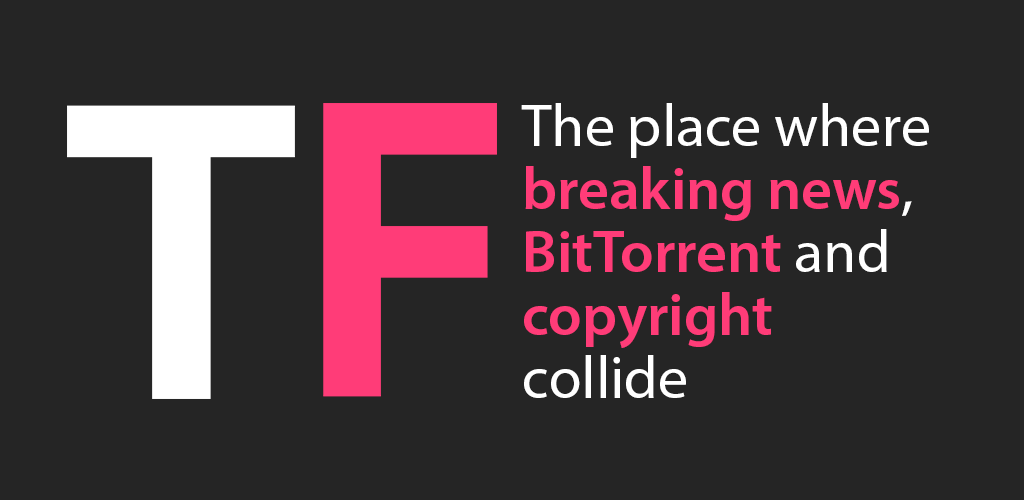
<style>
.page{position:relative;width:1024px;height:500px;background:#252525}
.page>*{position:absolute;margin:0}
.t1{font:59.4px/63px "MyriadPro-Regular";color:#ffffff}
.t2{font:59.4px/63px "MyriadPro-Semibold";color:#ff3c78}
</style>
<div class="page">
<p class="t1" style="left:521px;top:103px;width:408px;height:295px">The place where<br><span class="t2">breaking news</span>,<br><span class="t2">BitTorrent </span>and <span class="t2">copyright<br></span>collide</p>
</div>
